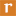
<style>
.page{position:relative;width:16px;height:16px;background:#d67c26}
.page>*{position:absolute;margin:0}
.t1{font:24.5px "Nyala-Regular";letter-spacing:-0.06em;color:#fefefe}
</style>
<div class="page">
<p class="t1" style="left:4px;top:3px;width:9px;height:10px">r</p>
</div>
